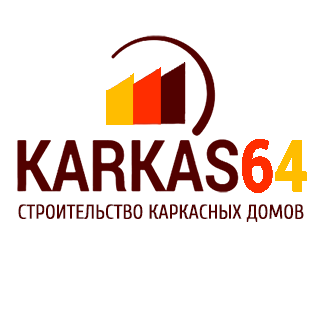
<style>
.page{position:relative;width:321px;height:321px;background:#ffffff}
.page>*{position:absolute;margin:0}
.t1{font:20.2px "Cuprum-Regular";color:#520100;text-transform:uppercase}
</style>
<div class="page">
<p class="t1" style="left:18px;top:204px;width:286px;height:18px">Строительство каркасных домов</p>
</div>
